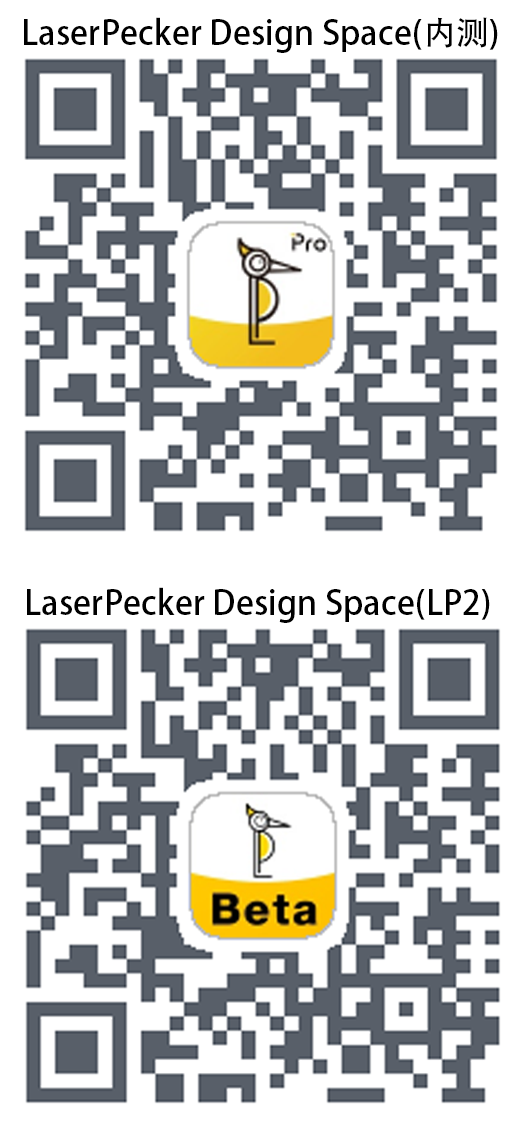
<style>
.page{position:relative;width:522px;height:1124px;background:#ffffff}
.page>*{position:absolute;margin:0}
.t1{font:33.3px "AdobeHeitiStd-Regular";color:#000000}
</style>
<div class="page">
<p class="t1" style="left:24px;top:17px;width:474px;height:36px">LaserPecker Design Space(内测)</p>
<p class="t1" style="left:27px;top:587px;width:463px;height:36px">LaserPecker Design Space(LP2)</p>
</div>
